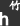
<style>
.page{position:relative;width:20px;height:26px;background:#333333}
.page>*{position:absolute;margin:0}
.t1{font:12px "DFKaiShu-SB-Estd-BF";color:#ffffff;font-weight:bold}
.t2{font:18px "ArialMT";color:#ffffff;font-weight:bold}
</style>
<div class="page">
<p class="t1" style="left:9px;top:0px;width:12px;height:11px">竹</p>
<p class="t2" style="left:0px;top:12px;width:9px;height:14px">h</p>
</div>
